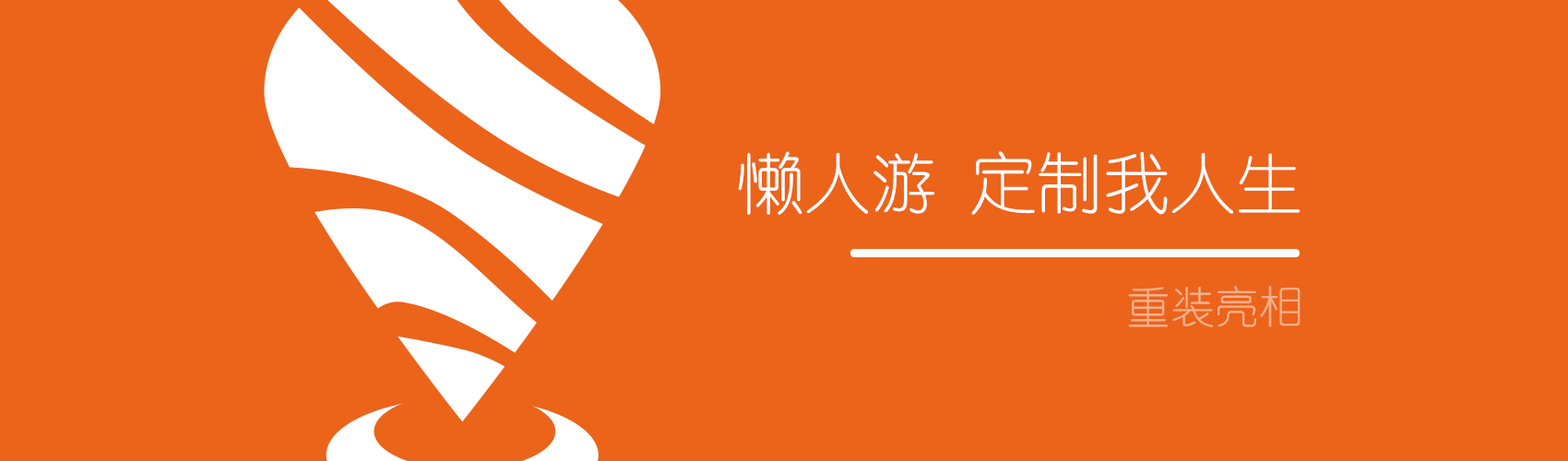
<style>
.page{position:relative;width:1568px;height:461px;background:#ec631a}
.page>*{position:absolute;margin:0}
.t1{font:66.4px "YouYuan";color:#ffffff}
.t2{font:44.3px "YouYuan";color:#f6b08a}
</style>
<div class="page">
<p class="t1" style="left:738px;top:151px;width:563px;height:64px">懒人游 定制我人生</p>
<p class="t2" style="left:1128px;top:285px;width:173px;height:42px">重装亮相</p>
</div>
